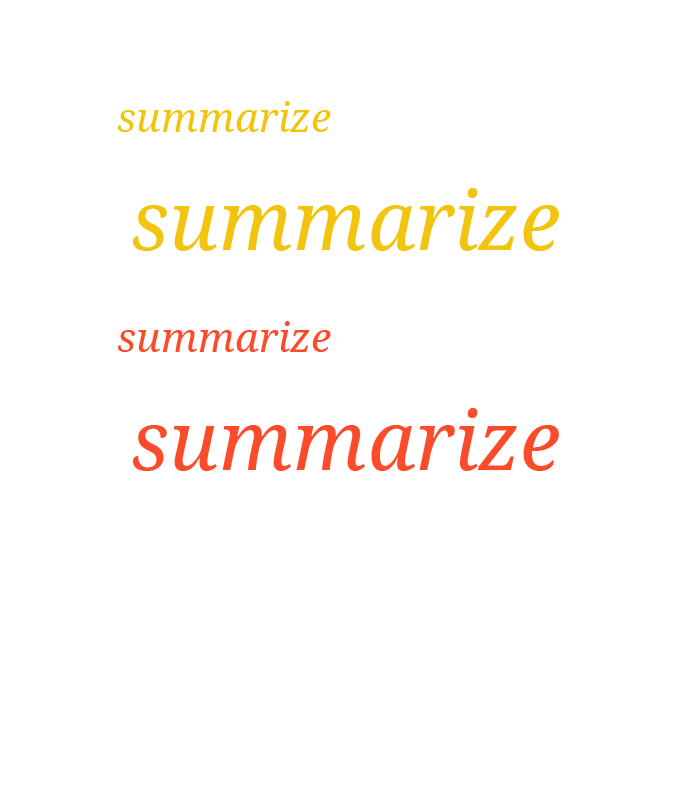
<style>
.page{position:relative;width:683px;height:792px;background:#ffffff}
.page>*{position:absolute;margin:0}
.t1{font:41px "DroidSerif-Italic";color:#f1c40f}
.t2{font:82.2px "DroidSerif-Italic";color:#f1c40f}
.t3{font:41px "DroidSerif-Italic";color:#fa4b2a}
.t4{font:82.2px "DroidSerif-Italic";color:#fa4b2a}
</style>
<div class="page">
<p class="t1" style="left:118px;top:101px;width:213px;height:31px">summarize</p>
<p class="t2" style="left:133px;top:188px;width:426px;height:63px">summarize</p>
<p class="t3" style="left:118px;top:321px;width:213px;height:31px">summarize</p>
<p class="t4" style="left:133px;top:408px;width:426px;height:63px">summarize</p>
</div>
